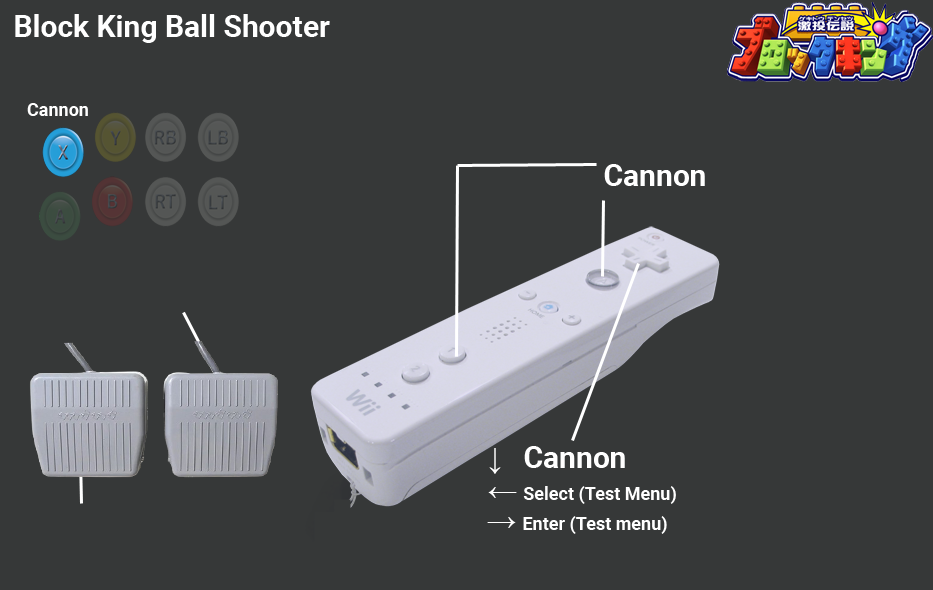
<style>
.page{position:relative;width:933px;height:590px;background:#363838}
.page>*{position:absolute;margin:0}
.t1{font:30px "Roboto-Bold";color:#ffffff}
.t2{font:18px "Roboto-Bold";color:#ffffff}
.t3{font:30px "MicrosoftSansSerif";color:#ffffff}
</style>
<div class="page">
<p class="t1" style="left:15px;top:14px;width:315px;height:29px">Block King Ball Shooter</p>
<p class="t2" style="left:27px;top:103px;width:61px;height:13px">Cannon</p>
<p class="t1" style="left:604px;top:164px;width:101px;height:22px">Cannon</p>
<p class="t1" style="left:489px;top:446px;width:136px;height:28px"><span class="t3">↓ </span>Cannon</p>
<p class="t2" style="left:488px;top:486px;width:188px;height:18px"><span class="t3">← </span>Select (Test Menu)</p>
<p class="t2" style="left:487px;top:516px;width:180px;height:18px"><span class="t3">→ </span>Enter (Test menu)</p>
</div>
